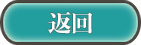
<style>
.page{position:relative;width:141px;height:45px;background:#239e9f}
.page>*{position:absolute;margin:0}
.t1{font:24px "RyuminPro-ExBold";color:#fdfbf9}
</style>
<div class="page">
<p class="t1" style="left:48px;top:12px;width:44px;height:22px">返回</p>
</div>
